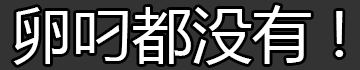
<style>
.page{position:relative;width:360px;height:70px;background:#333333}
.page>*{position:absolute;margin:0}
.t1{font:60px "MicrosoftYaHei";color:#ffffff}
</style>
<div class="page">
<p class="t1" style="left:13px;top:5px;width:331px;height:60px">卵叼都没有 !</p>
</div>
